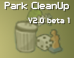
<style>
.page{position:relative;width:74px;height:58px}
.page>*{position:absolute;margin:0}
.t1{font:8px "PFTempestaSeven";color:#ffffff}
.t2{font:6px "PFTempestaSeven";color:#ffffff}
</style>
<div class="page">
<p class="t1" style="left:4px;top:1px;width:65px;height:10px">Park CleanUp</p>
<p class="t2" style="left:28px;top:17px;width:42px;height:7px">V2.0 beta 1</p>
</div>
